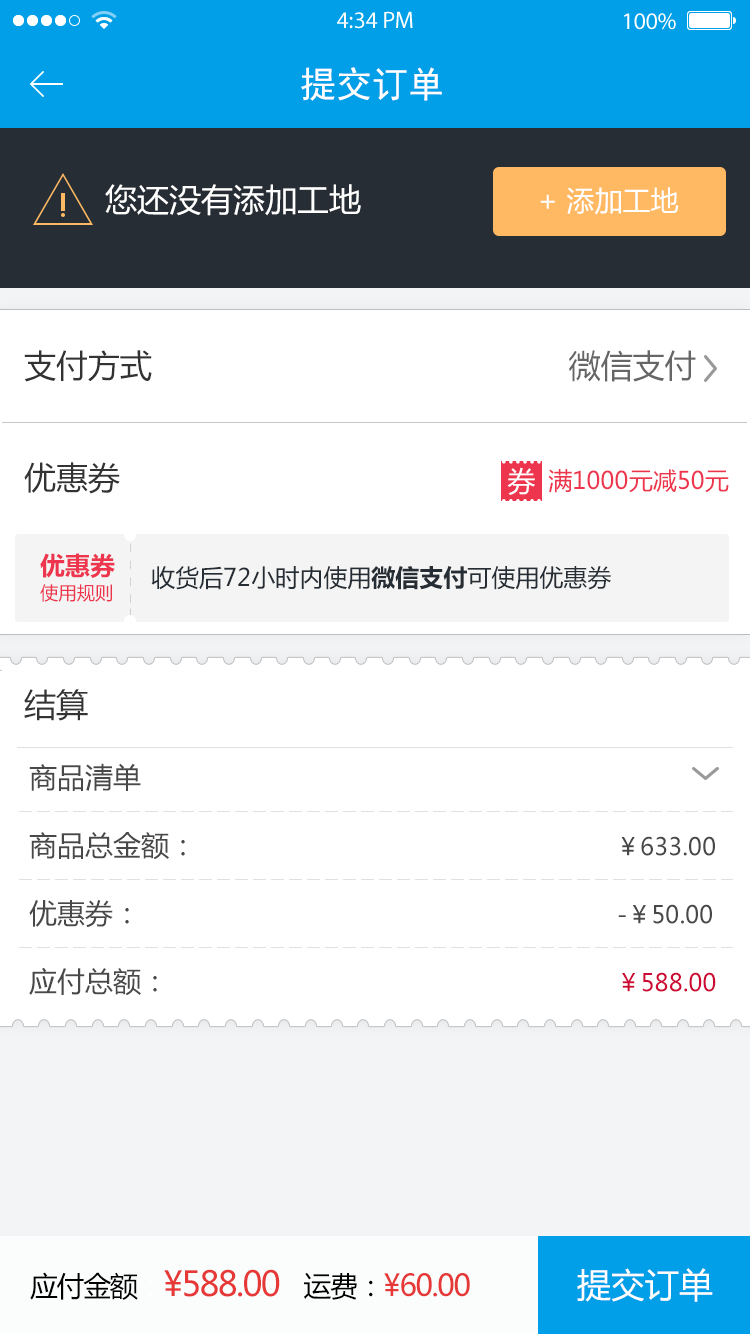
<style>
.page{position:relative;width:750px;height:1334px;background:#ffffff}
.page>*{position:absolute;margin:0}
.t1{font:36px "SimHei";color:#ffffff}
.t2{font:32px "MicrosoftYaHei";color:#ffffff}
.t3{font:28px "MicrosoftYaHei";color:#ffffff}
.t4{font:24px/28px "MicrosoftYaHei";color:#ed364d}
.t5{font:32px/28px "MicrosoftYaHei";color:#333333}
.t6{font:32px/28px "MicrosoftYaHei";color:#666666}
.t7{font:18.3px/24.9px "MicrosoftYaHei";color:#ed364d}
.t8{font:24.9px/24.9px "MicrosoftYaHei-Bold";color:#ed364d}
.t9{font:24px "MicrosoftYaHei";color:#262d35}
.t10{font:24px "MicrosoftYaHei-Bold";color:#262d35}
.t11{font:32px "MicrosoftYaHei";color:#333333}
.t12{font:28px/68px "MicrosoftYaHei";color:#484848}
.t13{font:24px/68px "MicrosoftYaHei";color:#484848}
.t14{font:24px/68px "MicrosoftYaHei";color:#ce0a34}
.t15{font:34px "MicrosoftYaHei";letter-spacing:-0.05em;color:#e73838}
.t16{font:28px "MicrosoftYaHei";letter-spacing:-0.05em;color:#000000}
.t17{font:28px "MicrosoftYaHei";letter-spacing:-0.05em;color:#ffffff}
.t18{font:30px "MicrosoftYaHei";letter-spacing:-0.05em;color:#e73838}
.t19{font:34px "MicrosoftYaHei";color:#ffffff}
</style>
<div class="page">
<p class="t1" style="left:301px;top:67px;width:141px;height:34px">提交订单</p>
<p class="t2" style="left:105px;top:184px;width:256px;height:32px">您还没有添加工地</p>
<p class="t3" style="left:540px;top:187px;width:139px;height:28px">+ 添加工地</p>
<p class="t4" style="left:24px;top:350px;width:705px;height:144px"><span class="t5">支付方式                                            </span><span class="t6">微信支付<br><br><br><br></span><span class="t5">优惠券                                                   </span>满1000元减50元</p>
<p class="t3" style="left:507px;top:467px;width:28px;height:28px">券</p>
<p class="t7" style="left:40px;top:553px;width:75px;height:49px"><span class="t8">优惠券<br></span>使用规则</p>
<p class="t9" style="left:151px;top:566px;width:460px;height:24px">收货后72小时内使用<span class="t10">微信支付</span>可使用优惠券</p>
<p class="t11" style="left:24px;top:689px;width:64px;height:32px">结算</p>
<p class="t12" style="left:29px;top:763px;width:687px;height:233px">商品清单<br>商品总金额：<span class="t13">                                                           ￥633.00<br></span>优惠券：<span class="t13">                                                                   -￥50.00<br></span>应付总额：                                                               <span class="t14">￥588.00</span></p>
<p class="t15" style="left:30px;top:1269px;width:440px;height:31px"><span class="t16">应付金额</span><span class="t17">：</span>¥588.00   <span class="t16">运费：</span><span class="t18">¥60.00</span></p>
<p class="t19" style="left:577px;top:1268px;width:136px;height:34px">提交订单</p>
</div>
